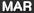
<style>
.page{position:relative;width:34px;height:13px}
.page>*{position:absolute;margin:0}
.t1{font:13.9px "K2D-ExtraBold";color:#ffffff}
</style>
<div class="page">
<p class="t1" style="left:2px;top:1px;width:30px;height:11px">MAR</p>
</div>
